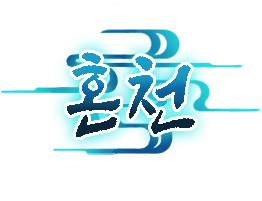
<style>
.page{position:relative;width:262px;height:201px;background:#ffffff}
.page>*{position:absolute;margin:0}
.t1{font:85.3px "SangSangRockOTF";letter-spacing:0.08em}
</style>
<div class="page">
<p class="t1" style="left:67px;top:52px;width:128px;height:85px">혼천</p>
</div>
